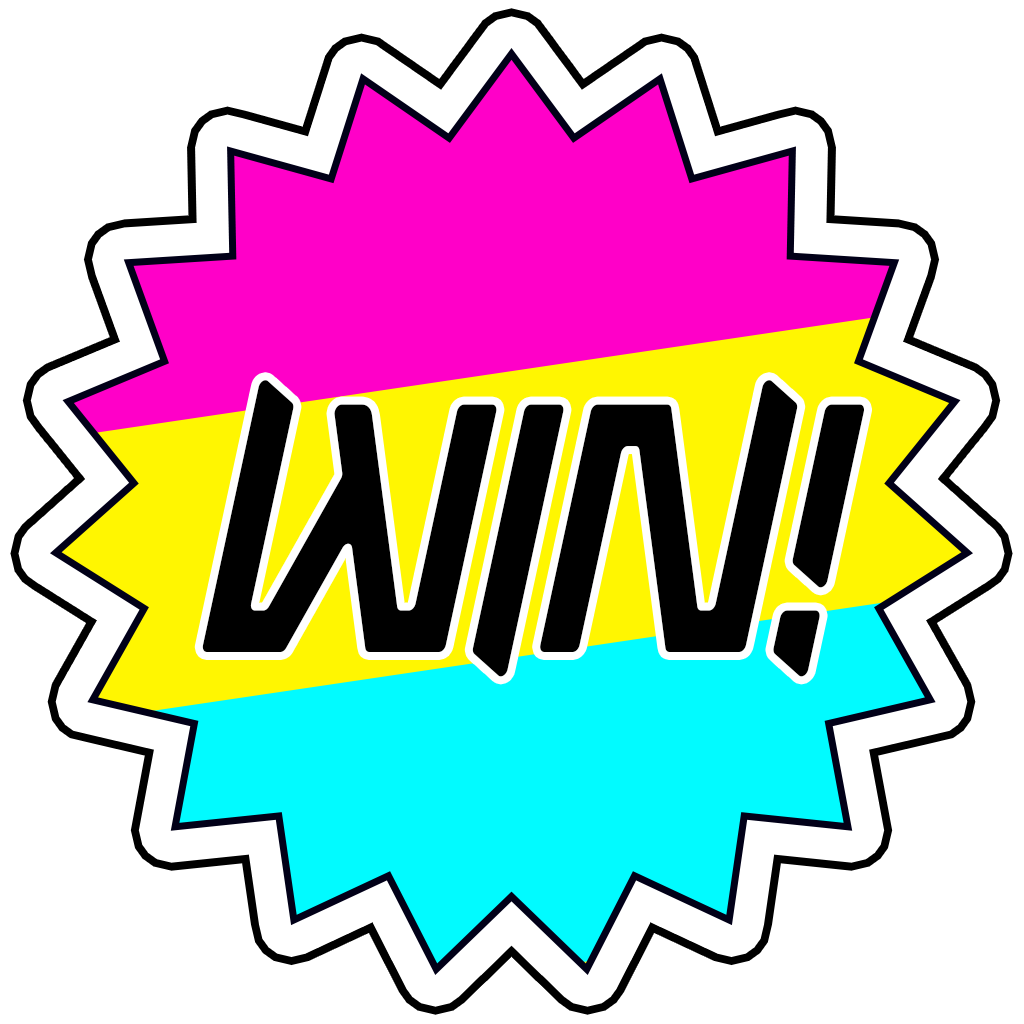
<style>
.page{position:relative;width:1024px;height:1024px;background:#ffffff}
.page>*{position:absolute;margin:0}
.t1{font:419px "CybassassinRounded";color:#000000;scale:0.75 1}
</style>
<div class="page">
<p class="t1" style="left:202px;top:380px;width:662px;height:297px">WIN!</p>
</div>
